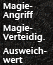
<style>
.page{position:relative;width:53px;height:65px}
.page>*{position:absolute;margin:0}
.t1{font:9px/9px "StoneSansSemITCTTSemi";color:#ffffff}
</style>
<div class="page">
<p class="t1" style="left:3px;top:2px;width:30px;height:18px">Magie-<br>Angriff</p>
<p class="t1" style="left:2px;top:24px;width:43px;height:18px">Magie-<br>Verteidig.</p>
<p class="t1" style="left:3px;top:47px;width:44px;height:16px">Ausweich-<br>wert</p>
</div>
